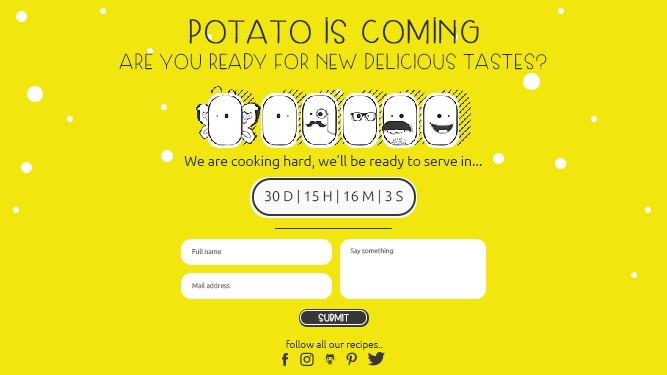
<style>
.page{position:relative;width:667px;height:375px;background:#f1e60d}
.page>*{position:absolute;margin:0}
.t1{font:32px "SkipLegDay";color:#2c2c2b;font-weight:bold}
.t2{font:21px "SkipLegDay";color:#2c2c2b}
.t3{font:14px "Ubuntu-Light";color:#2c2c2b}
.t4{font:14.1px "Ubuntu-Light";color:#2c2c2b;text-transform:uppercase}
.t5{font:6.8px "Ubuntu-Light";color:#737372}
.t6{font:6.5px "Ubuntu-Light";color:#737372}
.t7{font:9.4px "SkipLegDay";color:#ffffff;font-weight:bold}
.t8{font:10px "Ubuntu-Light";color:#2c2c2b}
</style>
<div class="page">
<p class="t1" style="left:189px;top:17px;width:290px;height:27px">potato is coming</p>
<p class="t2" style="left:119px;top:53px;width:428px;height:17px">ARE YOU READY FOR NEW DELICIOUS TASTES?</p>
<p class="t3" style="left:184px;top:155px;width:298px;height:14px">We are cooking hard, we’ll be ready to serve in...</p>
<p class="t4" style="left:264px;top:189px;width:139px;height:15px">30 d | 15 H | 16 M | 3 s</p>
<p class="t5" style="left:192px;top:248px;width:30px;height:7px">Full name</p>
<p class="t6" style="left:350px;top:247px;width:44px;height:8px">Say something</p>
<p class="t5" style="left:192px;top:282px;width:38px;height:7px">Mail address</p>
<p class="t7" style="left:318px;top:313px;width:31px;height:9px">SUBMIT</p>
<p class="t8" style="left:286px;top:340px;width:97px;height:10px">follow all our recipes..</p>
</div>
